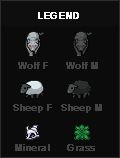
<style>
.page{position:relative;width:120px;height:158px;background:#0b0b0b}
.page>*{position:absolute;margin:0}
.t1{font:12px "Utsaah";color:#ffffff;font-weight:bold}
.t2{font:12px "Utsaah";color:#444444;font-weight:bold}
</style>
<div class="page">
<p class="t1" style="left:38px;top:12px;width:41px;height:7px">LEGEND</p>
<p class="t2" style="left:18px;top:62px;width:30px;height:7px">Wolf F</p>
<p class="t2" style="left:66px;top:62px;width:32px;height:7px">Wolf M</p>
<p class="t2" style="left:13px;top:104px;width:39px;height:9px">Sheep F</p>
<p class="t2" style="left:61px;top:104px;width:41px;height:9px">Sheep M</p>
<p class="t2" style="left:15px;top:144px;width:35px;height:7px">Mineral</p>
<p class="t2" style="left:67px;top:144px;width:28px;height:7px">Grass</p>
</div>
